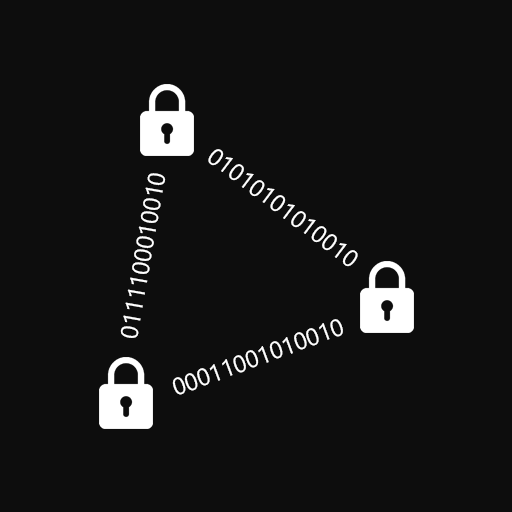
<style>
.page{position:relative;width:512px;height:512px;background:#0d0d0d}
.page>*{position:absolute;margin:0}
.t1{font:24px "SegoeUI";color:#ffffff}
</style>
<div class="page">
<p class="t1" style="left:208px;top:149px;width:150px;height:118px;rotate:37deg">01010101010010</p>
<p class="t1" style="left:120px;top:173px;width:46px;height:165px;rotate:-80deg">0111100010010</p>
<p class="t1" style="left:172px;top:319px;width:171px;height:76px;rotate:-20deg">00011001010010</p>
</div>
